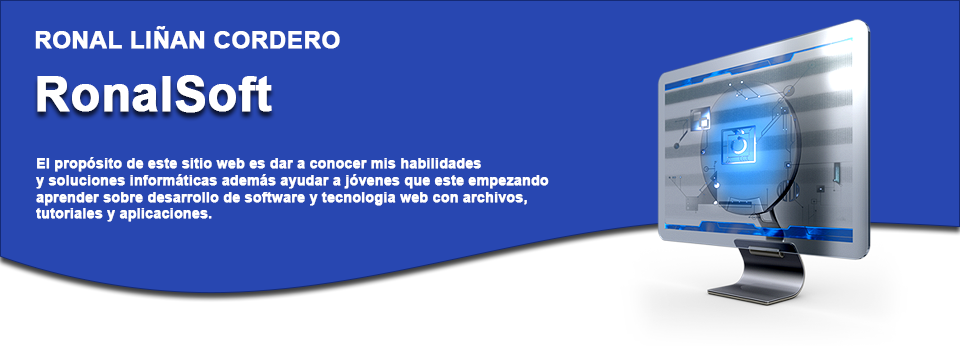
<style>
.page{position:relative;width:960px;height:350px;background:#2847b1}
.page>*{position:absolute;margin:0}
.t1{font:24px "Arial-BoldMT";color:#ffffff;font-weight:bold}
.t2{font:48px "Arial-BoldMT";color:#ffffff;font-weight:bold}
.t3{font:14px "Arial-BoldMT";color:#ffffff;font-weight:bold}
</style>
<div class="page">
<p class="t1" style="left:35px;top:26px;width:305px;height:23px">RONAL LIÑAN CORDERO</p>
<p class="t2" style="left:37px;top:75px;width:235px;height:38px">RonalSoft</p>
<p class="t3" style="left:36px;top:157px;width:513px;height:65px">El propósito de este sitio web es dar a conocer mis habilidades <br>y soluciones informáticas además ayudar a jóvenes que este empezando<br>aprender sobre desarrollo de software y tecnologia web con archivos, <br>tutoriales y aplicaciones.</p>
</div>
